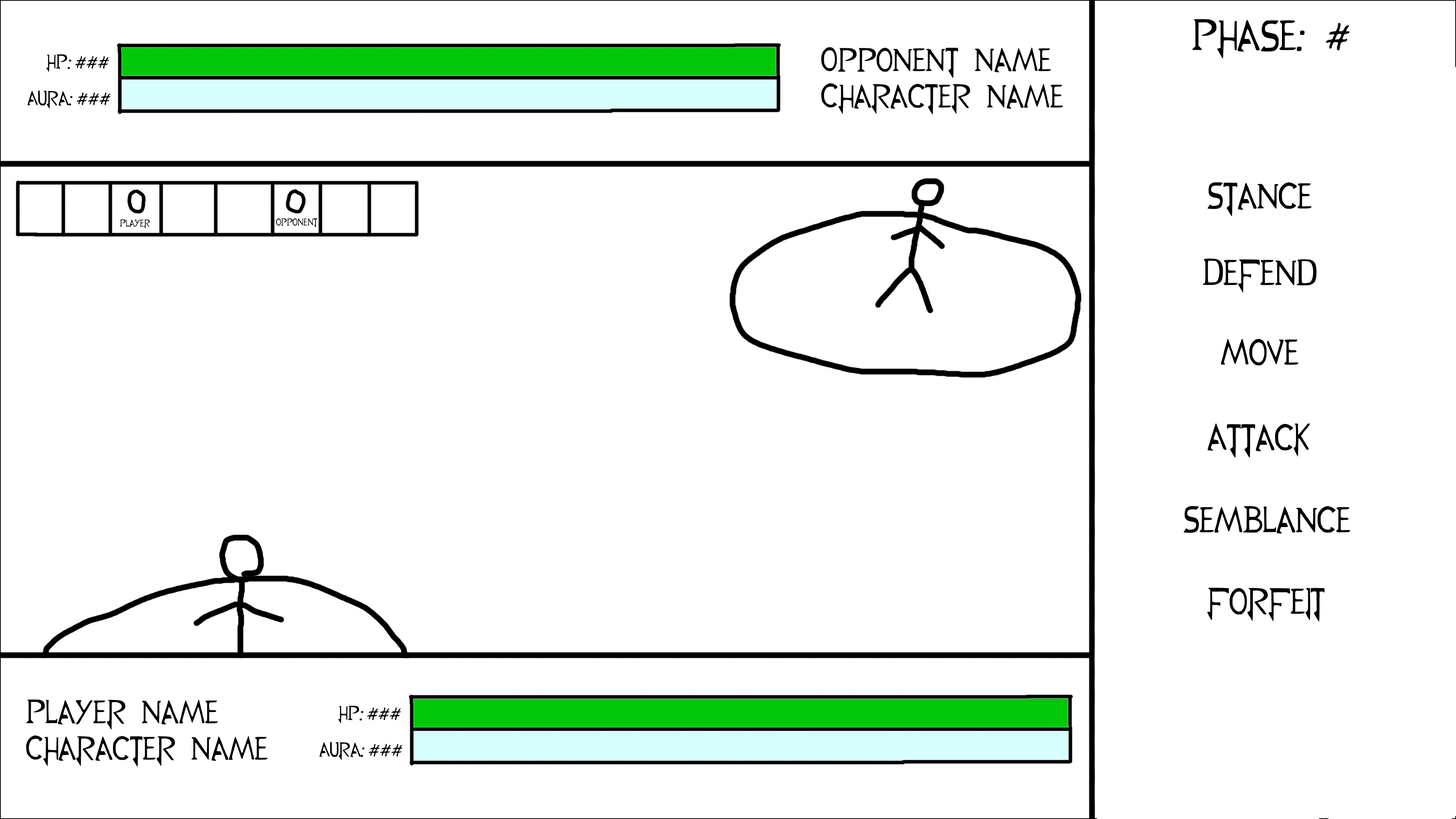
<style>
.page{position:relative;width:1456px;height:819px;background:#ffffff}
.page>*{position:absolute;margin:0}
.t1{font:49.3px "RWBY_Style";color:#000000}
.t2{font:37.9px/9.1px "RWBY_Style";color:#000000}
.t3{font:22.7px/9.1px "RWBY_Style";color:#000000}
.t4{font:41.7px "RWBY_Style";color:#000000}
.t5{font:11.4px "RWBY_Style";color:#000000}
</style>
<div class="page">
<p class="t1" style="left:1192px;top:19px;width:158px;height:40px">Phase: #</p>
<p class="t2" style="left:821px;top:47px;width:242px;height:68px">Opponent Name<br><br><br><br>Character Name</p>
<p class="t3" style="left:27px;top:54px;width:84px;height:55px">HP: ###<br><br><br><br>Aura: ###</p>
<p class="t4" style="left:1208px;top:182px;width:104px;height:34px">Stance</p>
<p class="t5" style="left:120px;top:219px;width:30px;height:10px">Player</p>
<p class="t5" style="left:276px;top:218px;width:41px;height:9px">opponent</p>
<p class="t4" style="left:1203px;top:259px;width:113px;height:34px">Defend</p>
<p class="t4" style="left:1221px;top:339px;width:77px;height:27px">Move</p>
<p class="t4" style="left:1208px;top:424px;width:102px;height:34px">Attack</p>
<p class="t4" style="left:1184px;top:506px;width:166px;height:27px">Semblance</p>
<p class="t4" style="left:1207px;top:588px;width:118px;height:33px">Forfeit</p>
<p class="t2" style="left:26px;top:700px;width:242px;height:67px">Player Name<br><br><br><br>Character Name</p>
<p class="t3" style="left:319px;top:706px;width:84px;height:54px">HP: ###<br><br><br><br>Aura: ###</p>
</div>
